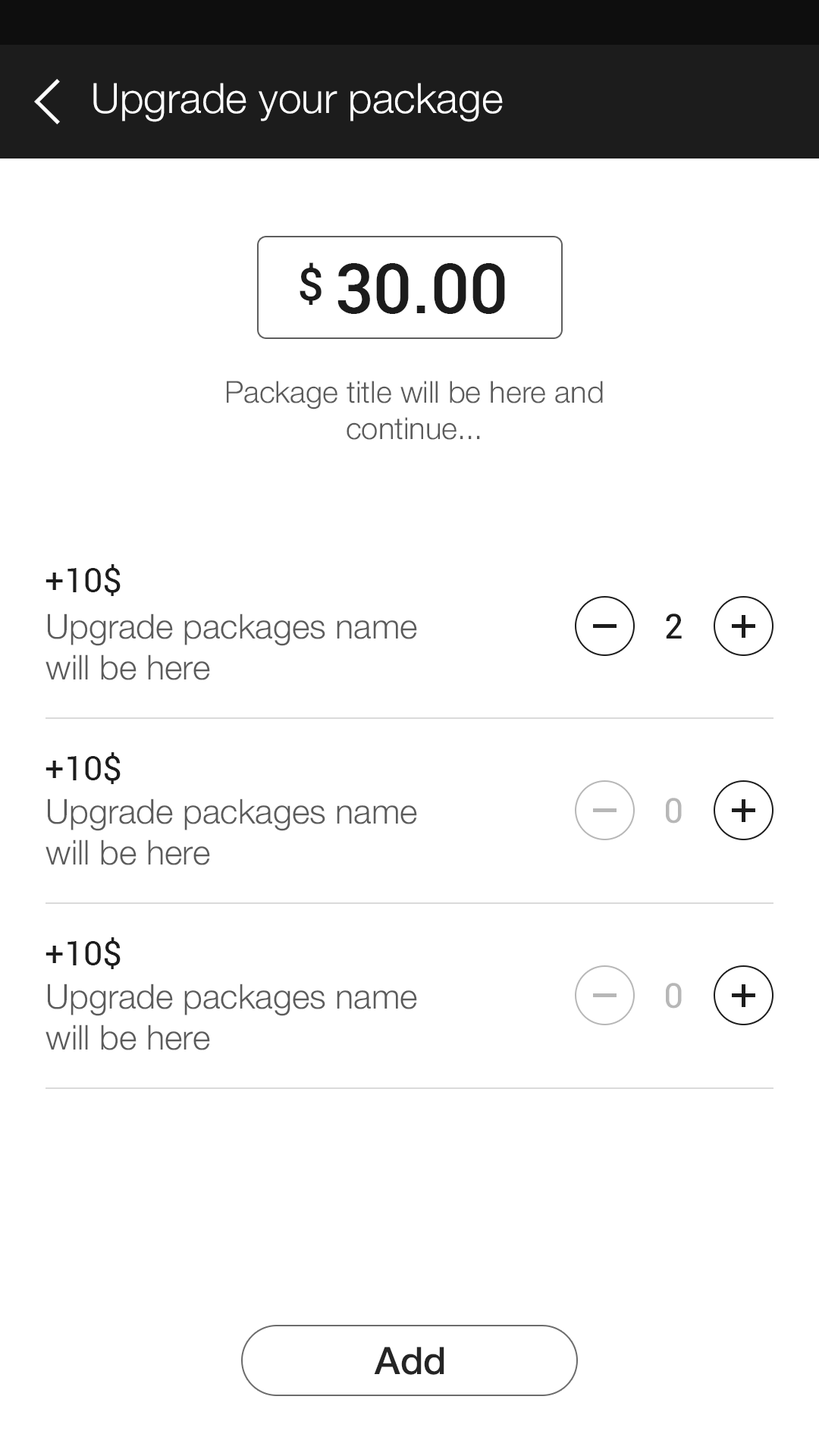
<style>
.page{position:relative;width:819px;height:1456px;background:#ffffff}
.page>*{position:absolute;margin:0}
.t1{font:41.7px "HelveticaNeue-Light";color:#ffffff}
.t2{font:45.5px "Roboto-Medium";color:#1c1c1c}
.t3{font:68.2px "Roboto-Medium";color:#1c1c1c}
.t4{font:30.3px "HelveticaNeue-Light";color:#5b5b5b}
.t5{font:34.1px "Roboto-Regular";color:#1c1c1c}
.t6{font:34.1px "HelveticaNeue-Light";color:#5b5b5b}
.t7{font:34.1px "Roboto-Regular";color:#1c1c1c;text-transform:uppercase}
.t8{font:34.1px "Roboto-Regular";color:#b7b7b7;text-transform:uppercase}
.t9{font:37.9px "HelveticaNeue-Medium";color:#252525}
</style>
<div class="page">
<p class="t1" style="left:93px;top:83px;width:410px;height:39px">Upgrade your package</p>
<p class="t2" style="left:300px;top:262px;width:22px;height:43px">$</p>
<p class="t3" style="left:337px;top:263px;width:168px;height:51px">30.00</p>
<p class="t4" style="left:227px;top:381px;width:376px;height:59px;text-align:center">Package title will be here and<br>continue...</p>
<p class="t5" style="left:45px;top:564px;width:76px;height:32px">+10$</p>
<p class="t6" style="left:45px;top:613px;width:372px;height:67px">Upgrade packages name<br>will be here</p>
<p class="t7" style="left:666px;top:613px;width:16px;height:26px">2</p>
<p class="t5" style="left:45px;top:752px;width:76px;height:32px">+10$</p>
<p class="t8" style="left:666px;top:798px;width:16px;height:26px">0</p>
<p class="t6" style="left:45px;top:799px;width:372px;height:66px">Upgrade packages name<br>will be here</p>
<p class="t5" style="left:45px;top:937px;width:76px;height:32px">+10$</p>
<p class="t6" style="left:45px;top:984px;width:372px;height:66px">Upgrade packages name<br>will be here</p>
<p class="t8" style="left:666px;top:983px;width:16px;height:26px">0</p>
<p class="t9" style="left:374px;top:1347px;width:70px;height:28px">Add</p>
</div>
